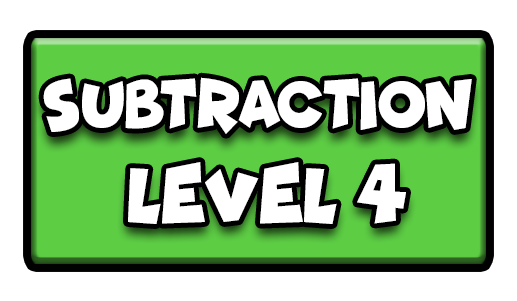
<style>
.page{position:relative;width:517px;height:301px;background:#ffffff}
.page>*{position:absolute;margin:0}
.t1{font:68.8px "Funhouse";color:#ffffff;scale:0.85 1}
.t2{font:77.7px "Funhouse";color:#ffffff;scale:0.95 1}
</style>
<div class="page">
<p class="t1" style="left:43px;top:77px;width:429px;height:57px">SUBTRACTION</p>
<p class="t2" style="left:128px;top:162px;width:278px;height:62px">LEVEL 4</p>
</div>
